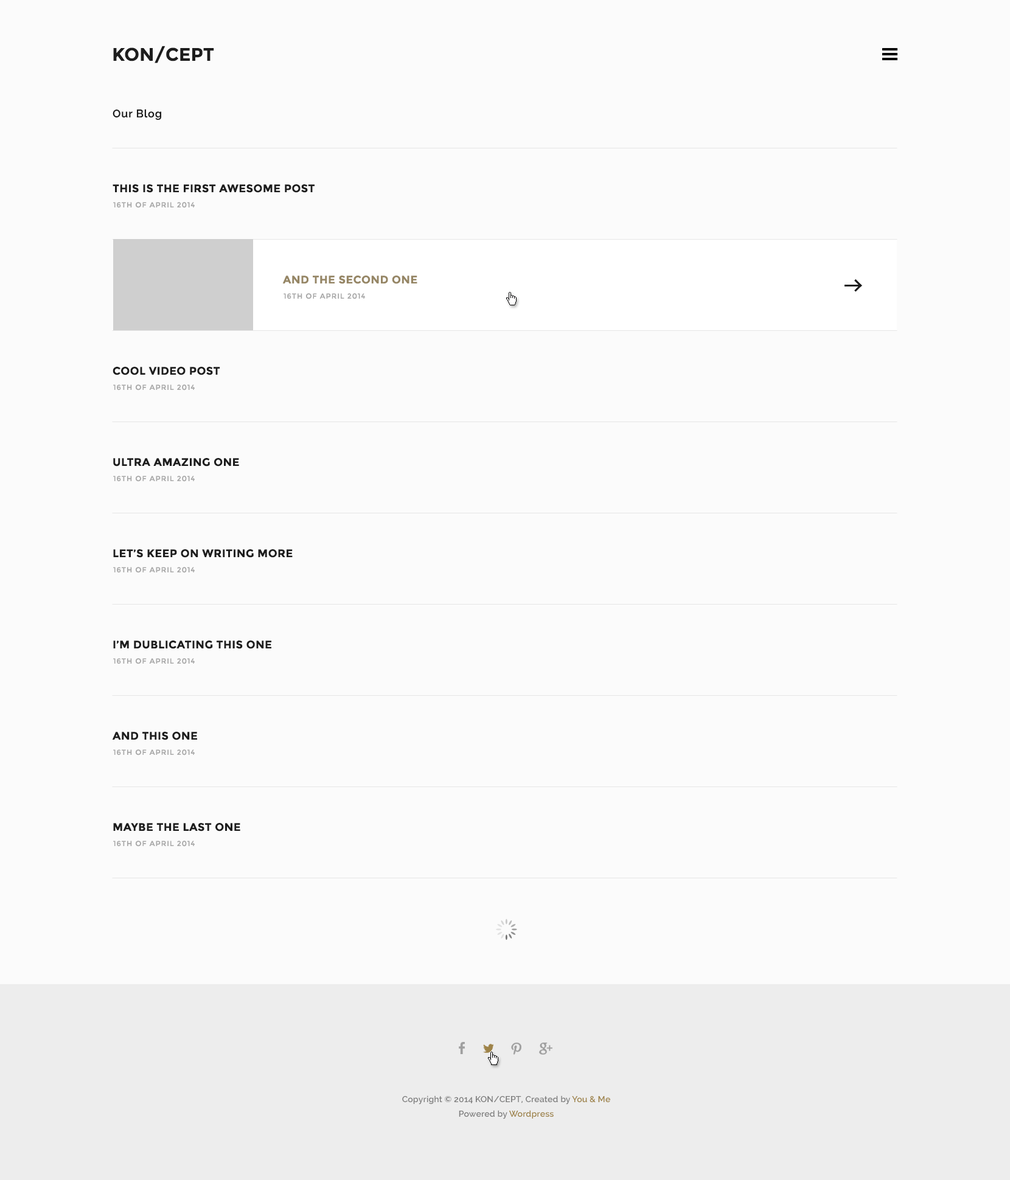
<style>
.page{position:relative;width:1010px;height:1180px;background:#fbfbfb}
.page>*{position:absolute;margin:0}
.t1{font:18.3px "Montserrat-Bold";color:#1d1d1d;text-transform:uppercase}
.t2{font:11px "Raleway-SemiBold";letter-spacing:0.05em;color:#1d1d1d}
.t3{font:11px "Montserrat-Bold";letter-spacing:0.025em;color:#1d1d1d;text-transform:uppercase}
.t4{font:7.3px "Montserrat-Regular";letter-spacing:0.075em;color:#a8a8a8;text-transform:uppercase}
.t5{font:11px "Montserrat-Bold";letter-spacing:0.025em;color:#968665;text-transform:uppercase}
.t6{font:8.5px/14.6px "Raleway-SemiBold";letter-spacing:0.01em;color:#7d7d7d}
.t7{font:8.5px/14.6px "Raleway-SemiBold";letter-spacing:0.01em;color:#9e8348}
</style>
<div class="page">
<p class="t1" style="left:113px;top:46px;width:101px;height:17px">kON/CEPT</p>
<p class="t2" style="left:113px;top:109px;width:48px;height:11px">Our Blog</p>
<p class="t3" style="left:113px;top:184px;width:202px;height:9px">This Is The First Awesome Post</p>
<p class="t4" style="left:113px;top:202px;width:82px;height:6px">16th of April 2014</p>
<p class="t5" style="left:282px;top:276px;width:135px;height:8px">And The Second One</p>
<p class="t4" style="left:284px;top:293px;width:81px;height:6px">16th of April 2014</p>
<p class="t3" style="left:113px;top:367px;width:107px;height:8px">Cool Video Post</p>
<p class="t4" style="left:113px;top:385px;width:82px;height:6px">16th of April 2014</p>
<p class="t3" style="left:113px;top:458px;width:126px;height:9px">Ultra Amazing One</p>
<p class="t4" style="left:113px;top:476px;width:82px;height:6px">16th of April 2014</p>
<p class="t3" style="left:113px;top:549px;width:180px;height:9px">Let’s Keep On Writing More</p>
<p class="t4" style="left:113px;top:567px;width:82px;height:6px">16th of April 2014</p>
<p class="t3" style="left:113px;top:641px;width:158px;height:8px">I’m Dublicating This One</p>
<p class="t4" style="left:113px;top:658px;width:82px;height:6px">16th of April 2014</p>
<p class="t3" style="left:112px;top:732px;width:85px;height:9px">And This One</p>
<p class="t4" style="left:113px;top:750px;width:82px;height:6px">16th of April 2014</p>
<p class="t3" style="left:113px;top:823px;width:127px;height:9px">Maybe The Last One</p>
<p class="t4" style="left:113px;top:841px;width:82px;height:6px">16th of April 2014</p>
<p class="t6" style="left:402px;top:1096px;width:208px;height:24px;text-align:center">Copyright © 2014 KON/CEPT, Created by <span class="t7">You &amp; Me<br></span>Powered by <span class="t7">Wordpress</span></p>
</div>
